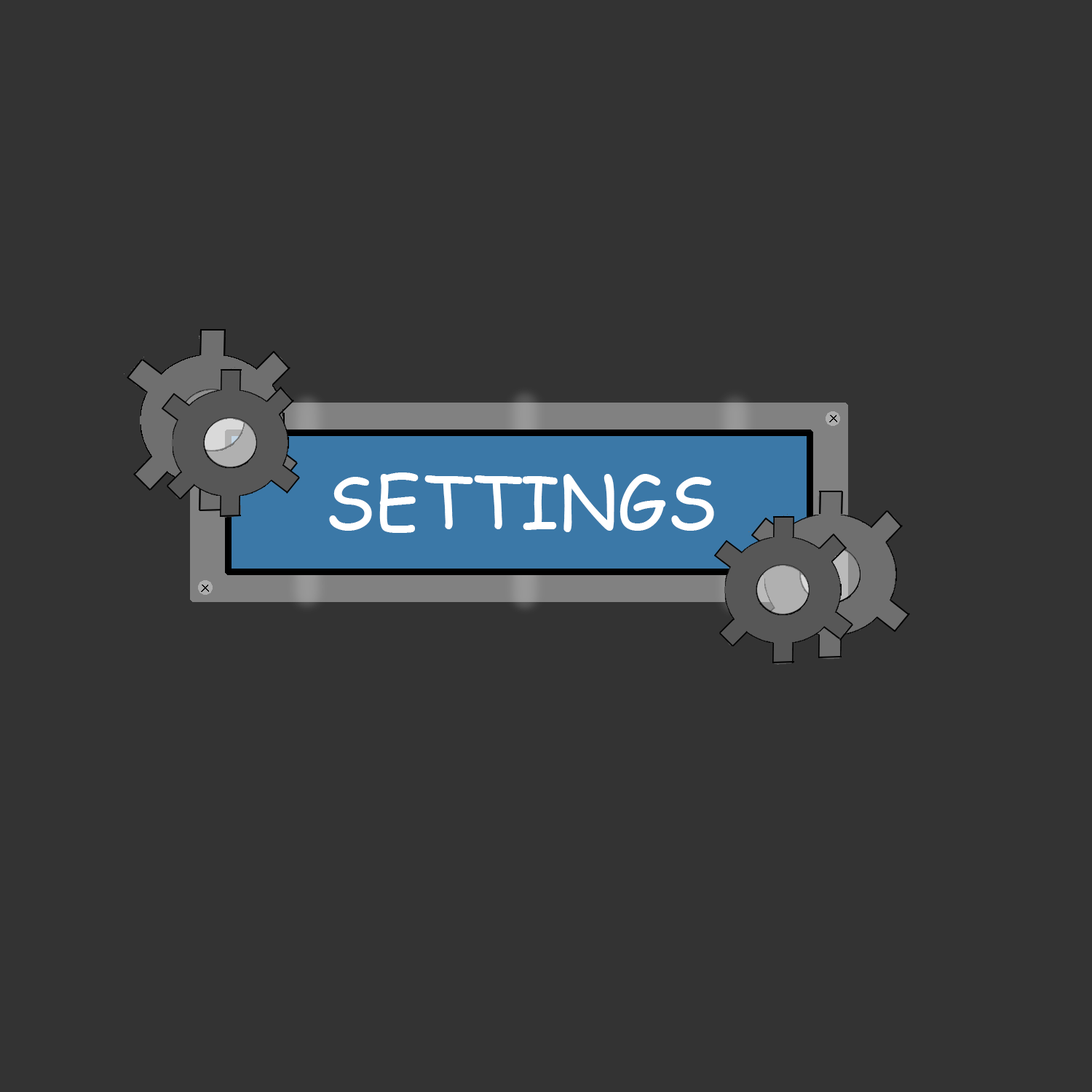
<style>
.page{position:relative;width:1092px;height:1092px;background:#333333}
.page>*{position:absolute;margin:0}
.t1{font:72.8px "ComicSansMS";color:#ffffff}
</style>
<div class="page">
<p class="t1" style="left:329px;top:472px;width:385px;height:61px">SETTINGS</p>
</div>
